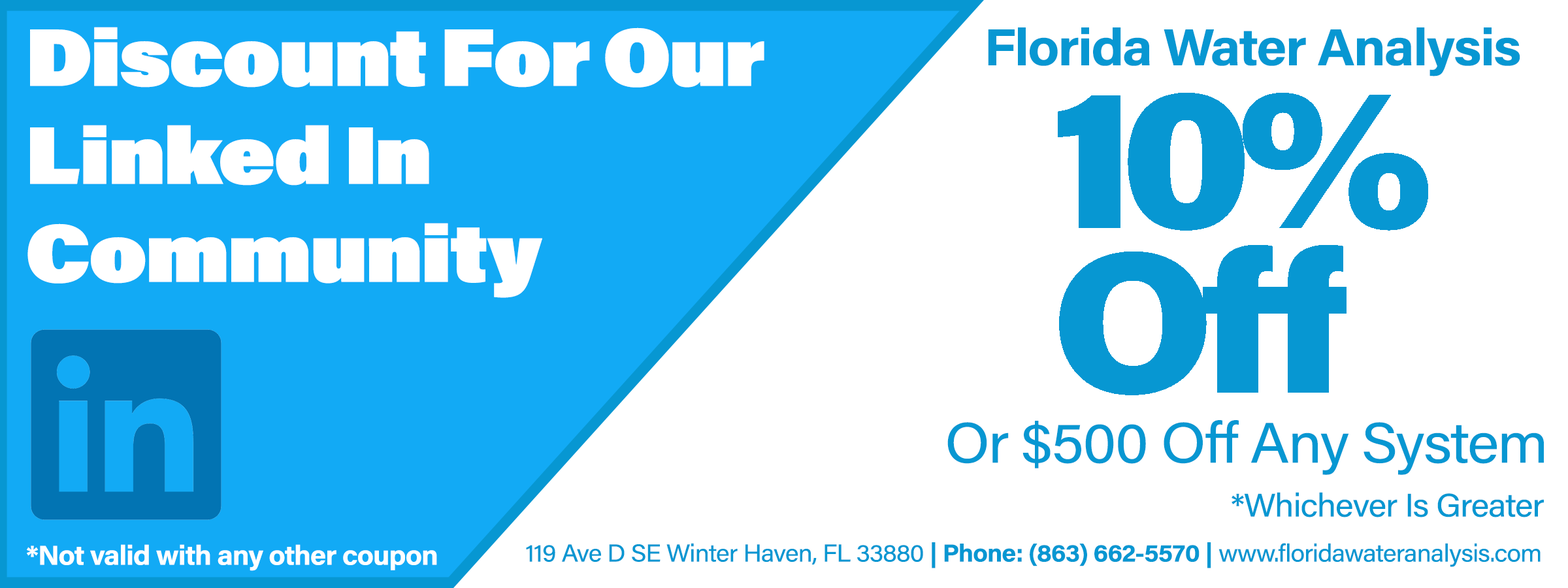
<style>
.page{position:relative;width:1568px;height:588px;background:#ffffff}
.page>*{position:absolute;margin:0}
.t1{font:81.7px "AcuminConcept-UltraBlack";letter-spacing:-0.025em;color:#ffffff;scale:1.05 1}
.t2{font:51.7px "AcuminConcept-Bold";letter-spacing:-0.025em;color:#0797d2;scale:1.05 1}
.t3{font:201.4px/164.5px "AcuminConcept-Black";letter-spacing:-0.08em;color:#0797d2;scale:1.05 1}
.t4{font:57.2px "AcuminConcept-Regular";letter-spacing:-0.025em;color:#0797d2;scale:1.05 1}
.t5{font:32.7px "AcuminConcept-Regular";letter-spacing:-0.025em;color:#0797d2;scale:1.05 1}
.t6{font:27.2px "AcuminConcept-Bold";letter-spacing:-0.025em;color:#ffffff;scale:1.05 1}
.t7{font:24.5px "AcuminConcept-Regular";letter-spacing:-0.025em;color:#0797d2;scale:1.05 1}
.t8{font:24.5px "AcuminConcept-Bold";letter-spacing:-0.025em;color:#0797d2;scale:1.05 1}
</style>
<div class="page">
<p class="t1" style="left:27px;top:27px;width:737px;height:271px">Discount For Our<br>Linked In<br>Community</p>
<p class="t2" style="left:988px;top:27px;width:532px;height:49px">Florida Water Analysis</p>
<p class="t3" style="left:1058px;top:93px;width:370px;height:302px">10%<br>Off</p>
<p class="t4" style="left:947px;top:420px;width:597px;height:55px">Or $500 Off Any System</p>
<p class="t5" style="left:1232px;top:492px;width:312px;height:25px">*Whichever Is Greater</p>
<p class="t6" style="left:27px;top:544px;width:410px;height:27px">*Not valid with any other coupon</p>
<p class="t7" style="left:526px;top:542px;width:1015px;height:26px">119 Ave D SE Winter Haven, FL 33880 <span class="t8">| Phone: (863) 662-5570 |</span> www.floridawateranalysis.com</p>
</div>
